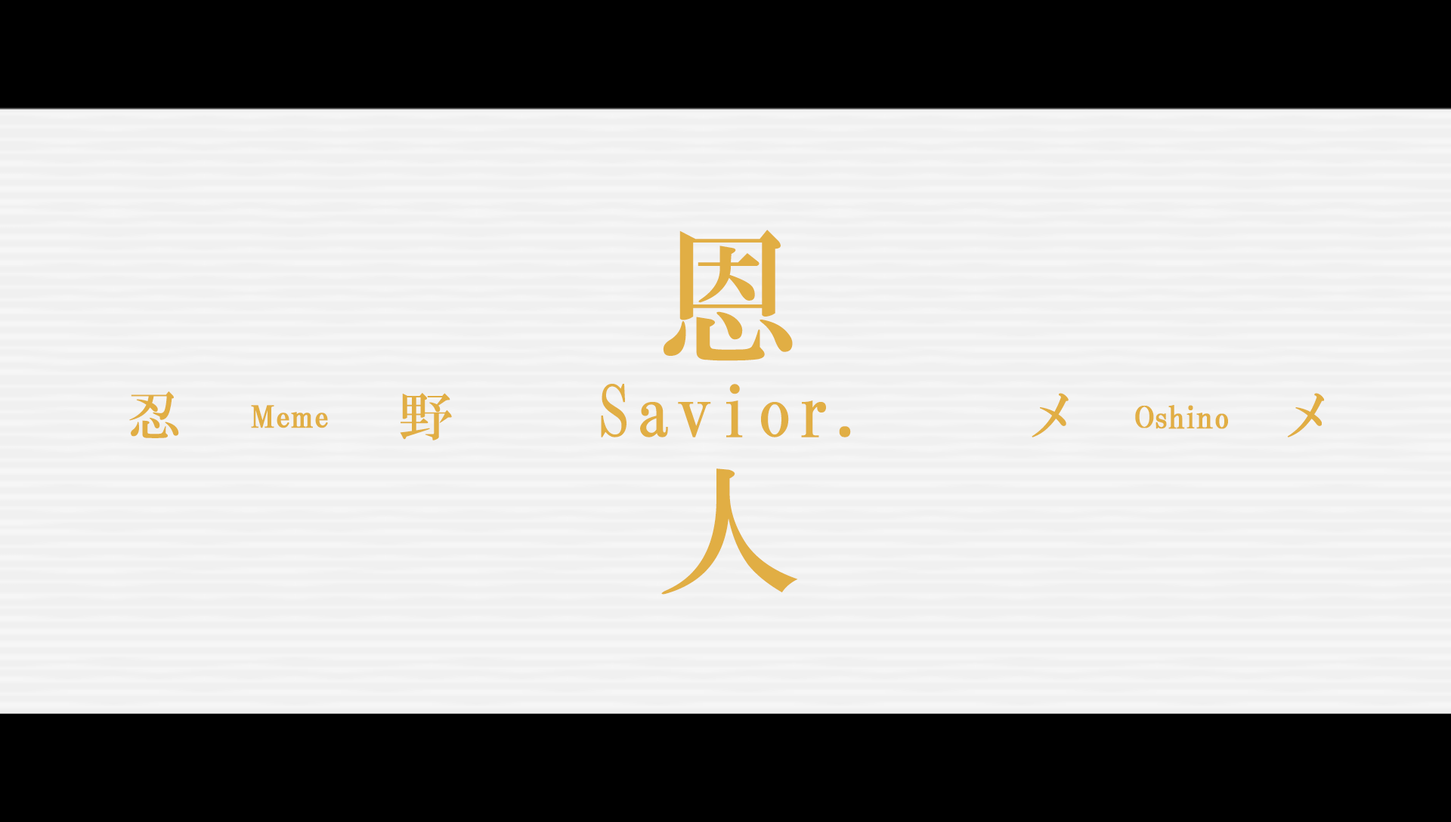
<style>
.page{position:relative;width:1451px;height:822px;background:#f0f0f0}
.page>*{position:absolute;margin:0}
.t1{font:145.8px/236.5px "HGMinchoB";letter-spacing:0.25em;color:#e1ae44}
.t2{font:72.5px "HGMinchoB";letter-spacing:0.05em;color:#e1ae44}
.t3{font:54.4px "HGMinchoB";letter-spacing:0.25em;color:#e1ae44}
.t4{font:30.2px "HGPMinchoB";letter-spacing:0.01em;color:#e1ae44;font-weight:bold}
</style>
<div class="page">
<p class="t1" style="left:661px;top:230px;width:137px;height:365px">恩<br>人</p>
<p class="t2" style="left:601px;top:384px;width:250px;height:53px">Savior.</p>
<p class="t3" style="left:129px;top:391px;width:1195px;height:49px">忍     野              メ     メ</p>
<p class="t4" style="left:251px;top:405px;width:77px;height:23px">Meme</p>
<p class="t4" style="left:1135px;top:405px;width:93px;height:24px">Oshino</p>
</div>
